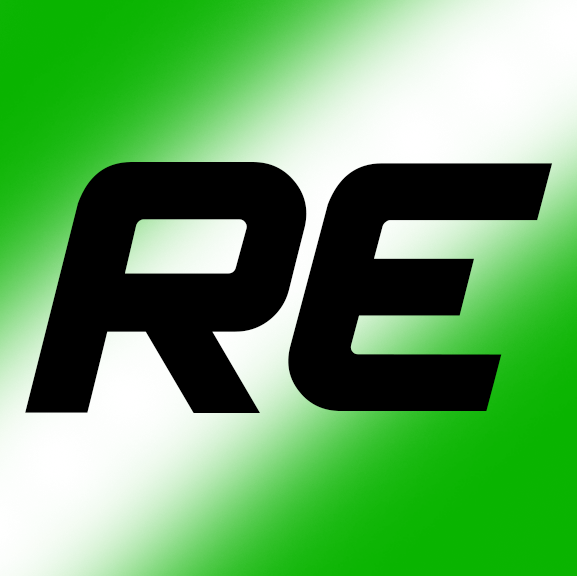
<style>
.page{position:relative;width:577px;height:576px;background:#000000}
.page>*{position:absolute;margin:0}
.t1{font:380.6px "Spantaran";color:#000000}
.t2{font:376.4px "Spantaran";color:#000000}
</style>
<div class="page">
<p class="t1" style="left:25px;top:162px;width:282px;height:251px">R</p>
<p class="t2" style="left:288px;top:163px;width:265px;height:248px">E</p>
</div>
